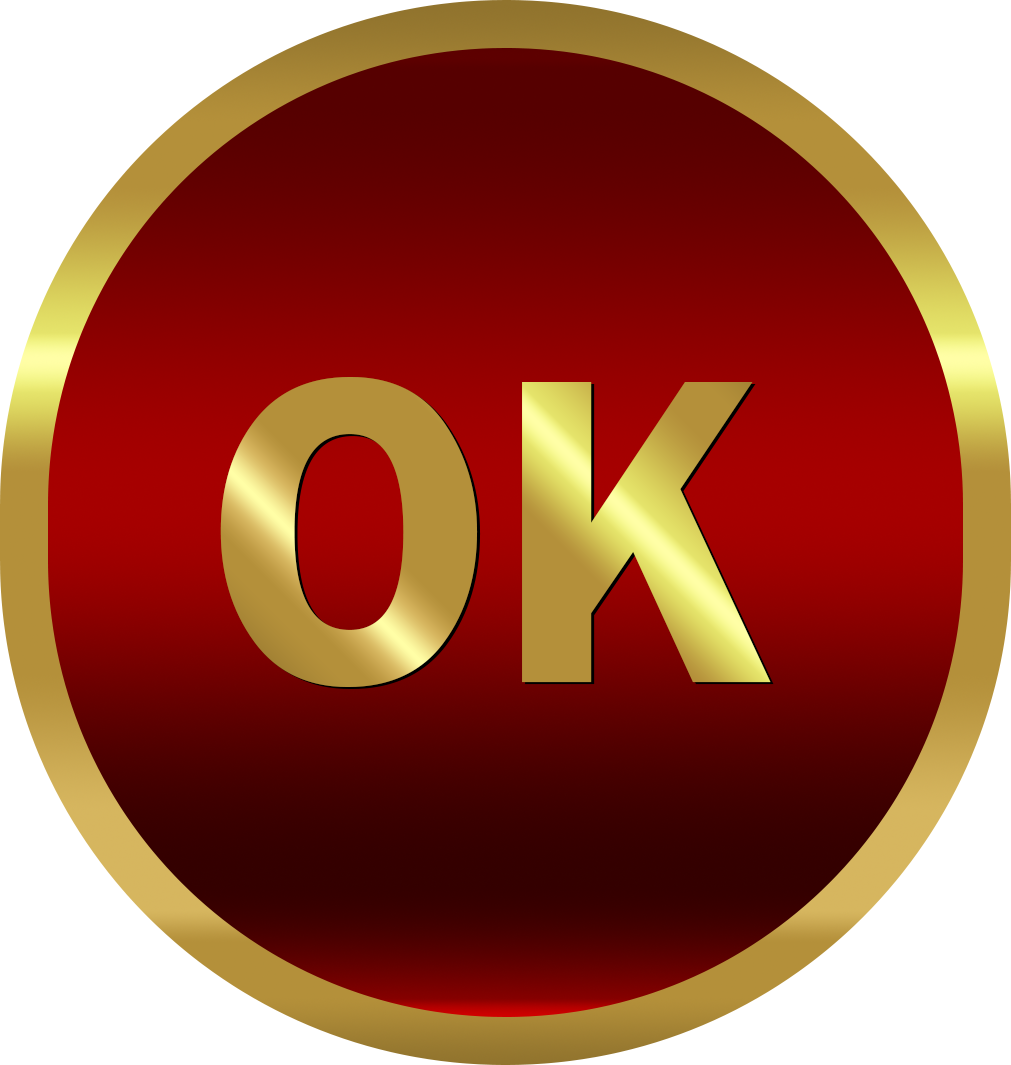
<style>
.page{position:relative;width:1011px;height:1065px;background:#ffffff}
.page>*{position:absolute;margin:0}
.t1{font:450.1px "FranklinGothic-Demi"}
</style>
<div class="page">
<p class="t1" style="left:220px;top:377px;width:551px;height:310px">OK</p>
</div>
